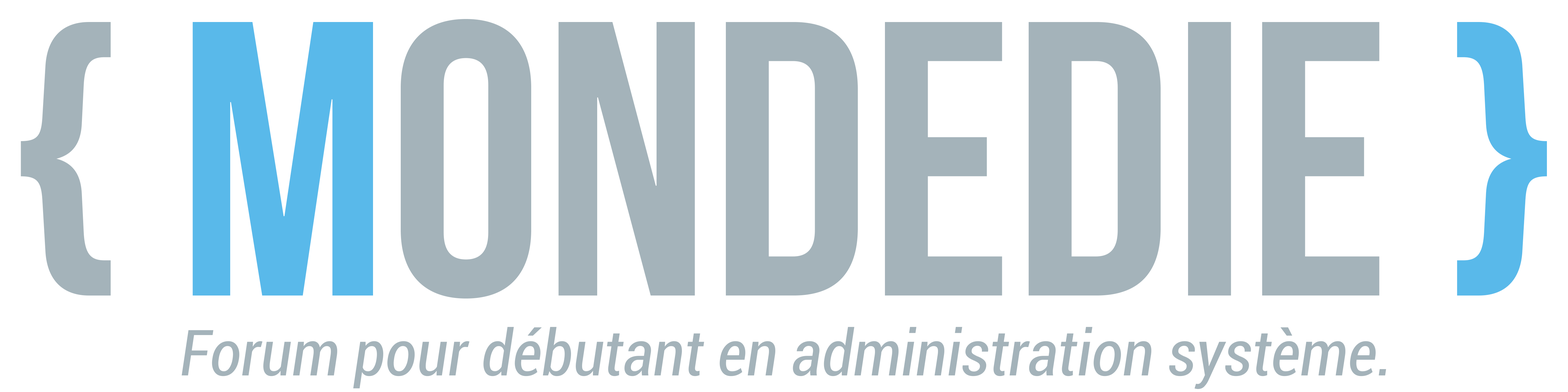
<style>
.page{position:relative;width:1568px;height:392px;background:#ffffff}
.page>*{position:absolute;margin:0}
.t1{font:390.5px "BebasNeue";color:#a4b3ba}
.t2{font:390.5px "BebasNeue";color:#59b9ea}
.t3{font:63.6px "Roboto-CondensedItalic";color:#a4b3ba}
</style>
<div class="page">
<p class="t1" style="left:21px;top:19px;width:1526px;height:279px">{ <span class="t2">M</span>ONDEDIE <span class="t2">}</span></p>
<p class="t3" style="left:182px;top:327px;width:1204px;height:62px">Forum pour débutant en administration système.</p>
</div>
